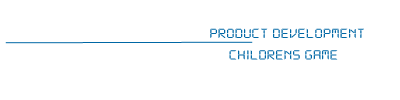
<style>
.page{position:relative;width:400px;height:100px;background:#ffffff}
.page>*{position:absolute;margin:0}
.t1{font:14.4px "DS-Digital";letter-spacing:-0.02em;color:#0067a5;scale:1.25 1}
</style>
<div class="page">
<p class="t1" style="left:210px;top:28px;width:154px;height:32px">Product Development<br>        Childrens Game</p>
</div>
